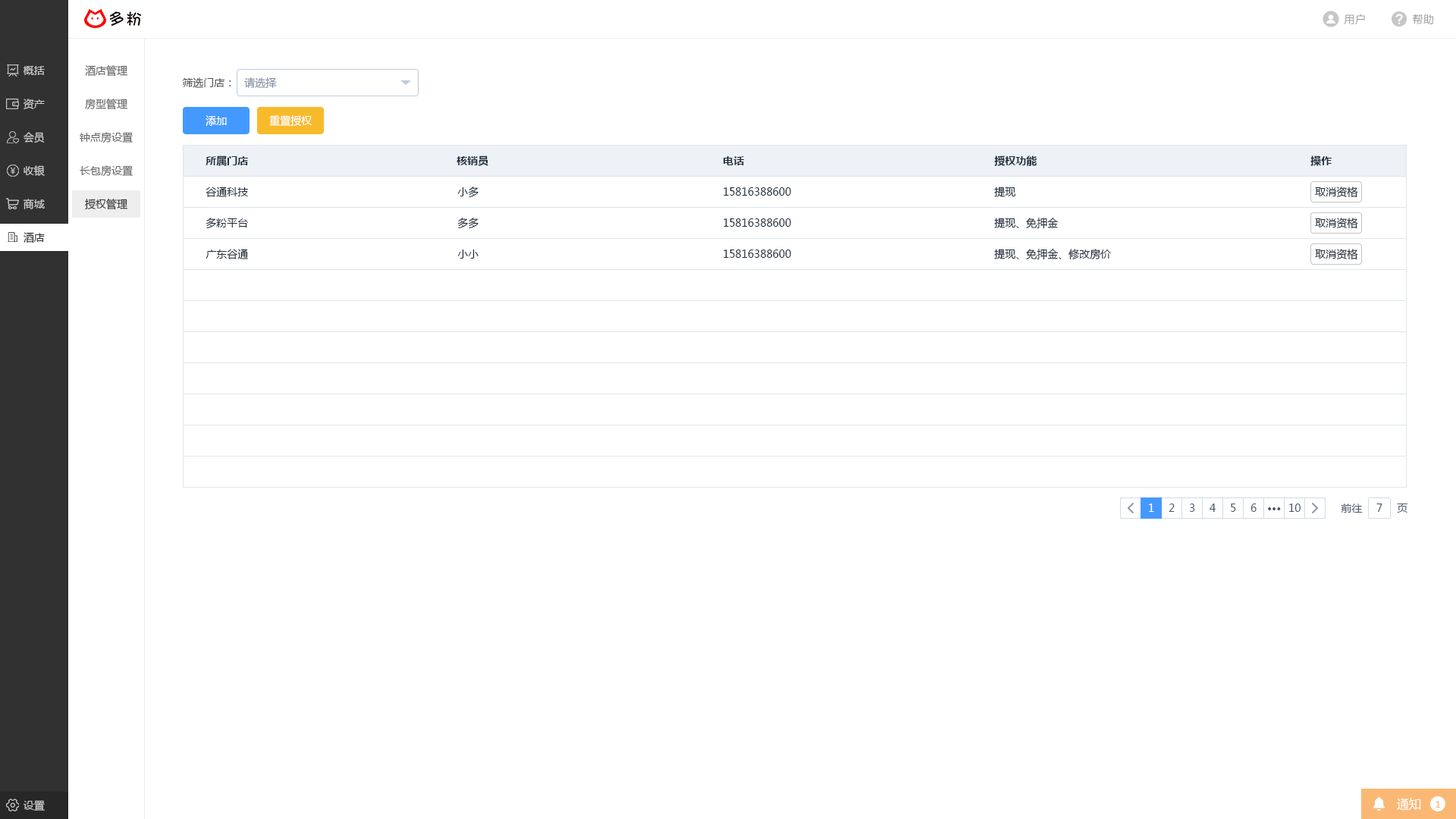
<style>
.page{position:relative;width:1456px;height:819px;background:#ffffff}
.page>*{position:absolute;margin:0}
.t1{font:10.6px "MicrosoftYaHei";letter-spacing:0.025em;color:#999999}
.t2{font:10.6px "MicrosoftYaHei";color:#cccccc}
.t3{font:10.6px "MicrosoftYaHei";color:#666666}
.t4{font:10.6px "MicrosoftYaHei";color:#505050}
.t5{font:10.6px "MicrosoftYaHei";color:#8391a5}
.t6{font:10.6px "MicrosoftYaHei";color:#ffffff}
.t7{font:10.6px "MicrosoftYaHei-Bold";color:#1f2d3d}
.t8{font:10.6px "MicrosoftYaHei";color:#1f2d3d}
.t9{font:10.6px "MicrosoftYaHei";color:#333333}
.t10{font:10.6px "MicrosoftYaHei";color:#313131}
.t11{font:10.6px "MicrosoftYaHei";color:#48576a}
.t12{font:10.6px "MicrosoftYaHei-Bold";color:#48576a}
.t13{font:12.1px "MicrosoftYaHei";color:#ffffff}
.t14{font:9.1px "MicrosoftYaHei";color:#fbb875}
</style>
<div class="page">
<p class="t1" style="left:1344px;top:14px;width:21px;height:11px">用户</p>
<p class="t1" style="left:1413px;top:14px;width:20px;height:11px">帮助</p>
<p class="t2" style="left:23px;top:66px;width:22px;height:9px">概括</p>
<p class="t3" style="left:85px;top:65px;width:42px;height:12px">酒店管理</p>
<p class="t4" style="left:182px;top:77px;width:49px;height:11px">筛选门店：</p>
<p class="t5" style="left:244px;top:77px;width:33px;height:11px">请选择</p>
<p class="t2" style="left:24px;top:99px;width:21px;height:10px">资产</p>
<p class="t3" style="left:85px;top:99px;width:42px;height:11px">房型管理</p>
<p class="t6" style="left:206px;top:115px;width:21px;height:11px">添加</p>
<p class="t6" style="left:269px;top:115px;width:43px;height:12px">重置授权</p>
<p class="t2" style="left:24px;top:132px;width:21px;height:11px">会员</p>
<p class="t3" style="left:80px;top:132px;width:53px;height:11px">钟点房设置</p>
<p class="t7" style="left:206px;top:155px;width:42px;height:11px">所属门店</p>
<p class="t7" style="left:457px;top:155px;width:31px;height:11px">核销员</p>
<p class="t7" style="left:723px;top:156px;width:22px;height:9px">电话</p>
<p class="t7" style="left:994px;top:155px;width:43px;height:11px">授权功能</p>
<p class="t7" style="left:1310px;top:155px;width:22px;height:11px">操作</p>
<p class="t2" style="left:24px;top:165px;width:21px;height:11px">收银</p>
<p class="t3" style="left:80px;top:165px;width:53px;height:12px">长包房设置</p>
<p class="t8" style="left:206px;top:187px;width:43px;height:10px">谷通科技</p>
<p class="t8" style="left:457px;top:187px;width:22px;height:11px">小多</p>
<p class="t8" style="left:723px;top:187px;width:68px;height:9px">15816388600</p>
<p class="t8" style="left:994px;top:187px;width:21px;height:10px">提现</p>
<p class="t8" style="left:1315px;top:187px;width:43px;height:11px">取消资格</p>
<p class="t2" style="left:23px;top:199px;width:22px;height:10px">商城</p>
<p class="t9" style="left:85px;top:199px;width:42px;height:11px">授权管理</p>
<p class="t8" style="left:206px;top:218px;width:42px;height:11px">多粉平台</p>
<p class="t8" style="left:457px;top:218px;width:22px;height:11px">多多</p>
<p class="t8" style="left:723px;top:218px;width:68px;height:9px">15816388600</p>
<p class="t8" style="left:994px;top:218px;width:64px;height:10px">提现、免押金</p>
<p class="t8" style="left:1315px;top:218px;width:43px;height:11px">取消资格</p>
<p class="t10" style="left:24px;top:232px;width:21px;height:11px">酒店</p>
<p class="t8" style="left:206px;top:249px;width:42px;height:10px">广东谷通</p>
<p class="t8" style="left:457px;top:249px;width:22px;height:10px">小小</p>
<p class="t8" style="left:723px;top:249px;width:68px;height:9px">15816388600</p>
<p class="t8" style="left:994px;top:249px;width:117px;height:11px">提现、免押金、修改房价</p>
<p class="t8" style="left:1315px;top:249px;width:43px;height:11px">取消资格</p>
<p class="t6" style="left:1149px;top:504px;width:5px;height:8px">1</p>
<p class="t11" style="left:1169px;top:504px;width:6px;height:8px">2</p>
<p class="t11" style="left:1189px;top:504px;width:6px;height:8px">3</p>
<p class="t11" style="left:1210px;top:504px;width:6px;height:8px">4</p>
<p class="t11" style="left:1231px;top:504px;width:5px;height:8px">5</p>
<p class="t11" style="left:1250px;top:504px;width:7px;height:8px">6</p>
<p class="t12" style="left:1268px;top:507px;width:13px;height:3px">···</p>
<p class="t11" style="left:1289px;top:504px;width:12px;height:8px">10</p>
<p class="t11" style="left:1341px;top:504px;width:22px;height:9px">前往</p>
<p class="t11" style="left:1376px;top:504px;width:6px;height:8px">7</p>
<p class="t11" style="left:1397px;top:504px;width:10px;height:9px">页</p>
<p class="t13" style="left:1397px;top:798px;width:24px;height:12px">通知</p>
<p class="t2" style="left:23px;top:800px;width:22px;height:11px">设置</p>
<p class="t14" style="left:1436px;top:801px;width:5px;height:7px">1</p>
</div>
